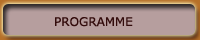
<style>
.page{position:relative;width:200px;height:40px;background:#b69e9e}
.page>*{position:absolute;margin:0}
.t1{font:12px "Verdana";color:#330c0c}
</style>
<div class="page">
<p class="t1" style="left:55px;top:17px;width:78px;height:10px">PROGRAMME</p>
</div>
